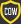
<style>
.page{position:relative;width:21px;height:24px;background:#333333}
.page>*{position:absolute;margin:0}
.t1{font:17px "BigNoodleTitling";letter-spacing:-0.01em;color:#ffffff}
</style>
<div class="page">
<p class="t1" style="left:4px;top:7px;width:14px;height:8px">COW</p>
</div>
